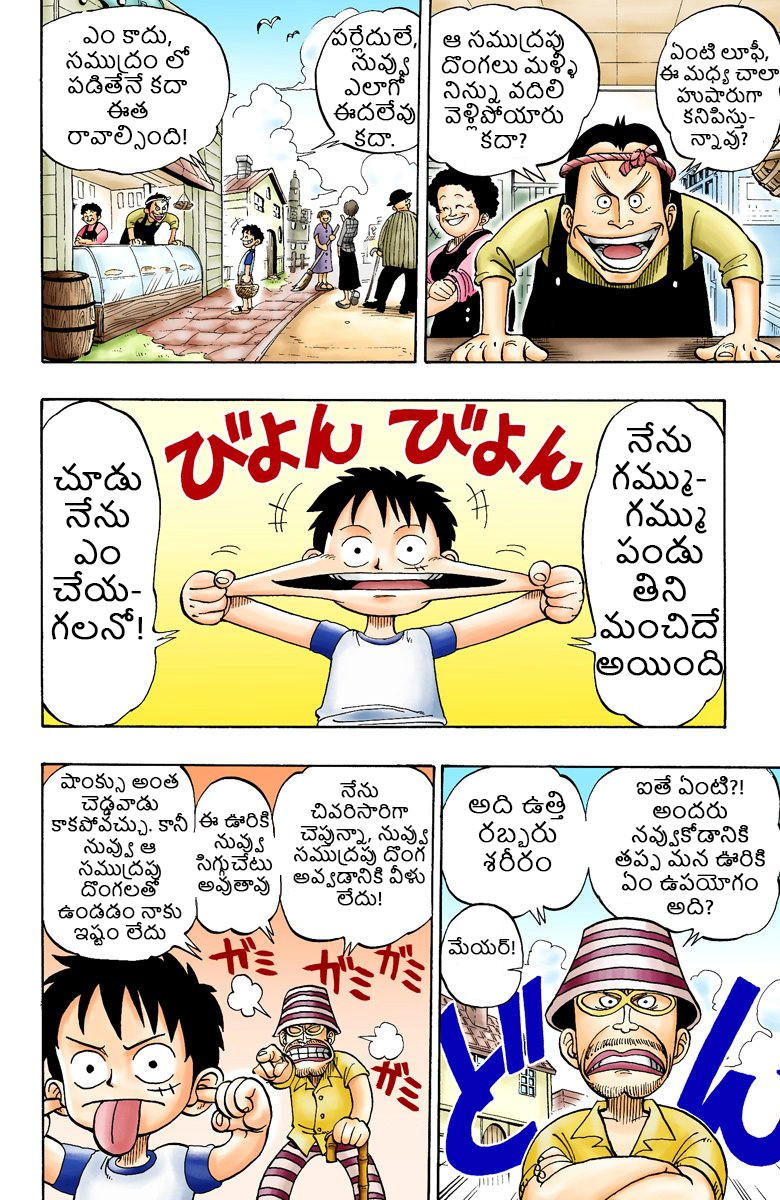
<style>
.page{position:relative;width:780px;height:1200px;background:#ffffff}
.page>*{position:absolute;margin:0}
.t1{font:21px "NirmalaUI";color:#000000;font-weight:bold}
.t2{font:21px "MyriadPro-Regular";color:#000000;font-weight:bold}
.t3{font:18px "NirmalaUI";color:#000000;font-weight:bold}
.t4{font:18px "MyriadPro-Regular";color:#000000;font-weight:bold}
.t5{font:31px "NirmalaUI";color:#000000;font-weight:bold}
.t6{font:20px "NirmalaUI";color:#000000;font-weight:bold}
.t7{font:24px "NirmalaUI";color:#000000;font-weight:bold}
</style>
<div class="page">
<p class="t1" style="left:66px;top:25px;width:124px;height:125px;text-align:center">ఎం కాదు, సముద్రం లో పడితేనే కదా ఈత రావాల్సింది!</p>
<p class="t1" style="left:331px;top:25px;width:86px;height:122px;text-align:center">పర్లేదులే, నువ్వు ఎలాగో ఈదలేవు కదా.</p>
<p class="t1" style="left:441px;top:29px;width:137px;height:120px;text-align:center">ఆ సముద్రపు దొంగలు మళ్ళీ నిన్ను    వదిలి  వెళ్లిపోయారు కదా<span class="t2">?</span></p>
<p class="t3" style="left:659px;top:40px;width:121px;height:110px;text-align:center">ఏంటి లూఫీ<span class="t4">,<br></span>ఈ మధ్య   చాలా హుషారుగా కనిపిస్తు-<br>న్నావు<span class="t4">?</span></p>
<p class="t5" style="left:596px;top:422px;width:127px;height:254px;text-align:center">నేను గమ్ము- గమ్ము పండు తిని మంచిదే అయింది</p>
<p class="t5" style="left:51px;top:462px;width:92px;height:178px;text-align:center">చూడు నేను ఎం చేయ-గలనో!</p>
<p class="t3" style="left:51px;top:773px;width:137px;height:173px;text-align:center">షాంక్సు అంత చెడ్డవాడు కాకపోవచ్చు. కానీ నువ్వు ఆ సముద్రపు దొంగలతో ఉండడం నాకు ఇష్టం లేదు</p>
<p class="t3" style="left:293px;top:780px;width:135px;height:126px;text-align:center">నేను చివరిసారిగా చెప్తున్నా, నువ్వు సముద్రపు దొంగ అవ్వడానికి వీళు లేదు!</p>
<p class="t6" style="left:615px;top:775px;width:150px;height:140px;text-align:center">ఐతే ఏంటి?! అందరు నవ్వుకోడానికి తప్ప మన ఊరికి ఏం ఉపయోగం అది?</p>
<p class="t7" style="left:468px;top:791px;width:98px;height:81px;text-align:center">అది ఉత్తి రబ్బరు శరీరం</p>
<p class="t3" style="left:196px;top:811px;width:77px;height:85px;text-align:center">ఈ ఊరికి నువ్వు సిగ్గుచేటు అవుతావు</p>
<p class="t3" style="left:447px;top:937px;width:68px;height:18px">మేయర్!</p>
</div>
